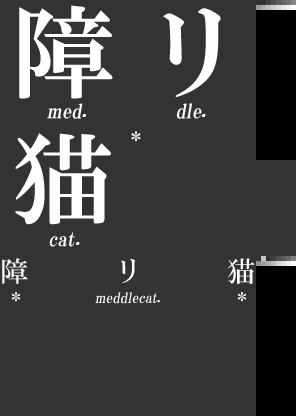
<style>
.page{position:relative;width:296px;height:416px;background:#333333}
.page>*{position:absolute;margin:0}
.t1{font:102.2px "HGPMinchoE";letter-spacing:0.075em;color:#ffffff}
.t2{font:19.5px "HGPMinchoE";letter-spacing:0.01em;color:#ffffff;font-style:italic}
.t3{font:14px "HGPMinchoE";letter-spacing:0.01em;color:#ffffff;font-style:italic}
</style>
<div class="page">
<p class="t1" style="left:19px;top:5px;width:202px;height:94px">障　リ</p>
<p class="t2" style="left:47px;top:103px;width:159px;height:16px">med.     dle.</p>
<p class="t1" style="left:15px;top:133px;width:96px;height:92px">猫</p>
<p class="t2" style="left:49px;top:232px;width:31px;height:15px">cat.</p>
<p class="t3" style="left:95px;top:292px;width:65px;height:12px">meddlecat.</p>
</div>
